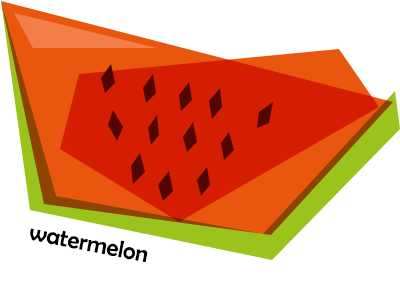
<style>
.page{position:relative;width:400px;height:282px;background:#ffffff}
.page>*{position:absolute;margin:0}
.t1{font:24px "BerlinSansFB-Reg";color:#000000}
</style>
<div class="page">
<p class="t1" style="left:30px;top:228px;width:118px;height:35px;rotate:11deg">watermelon</p>
</div>
